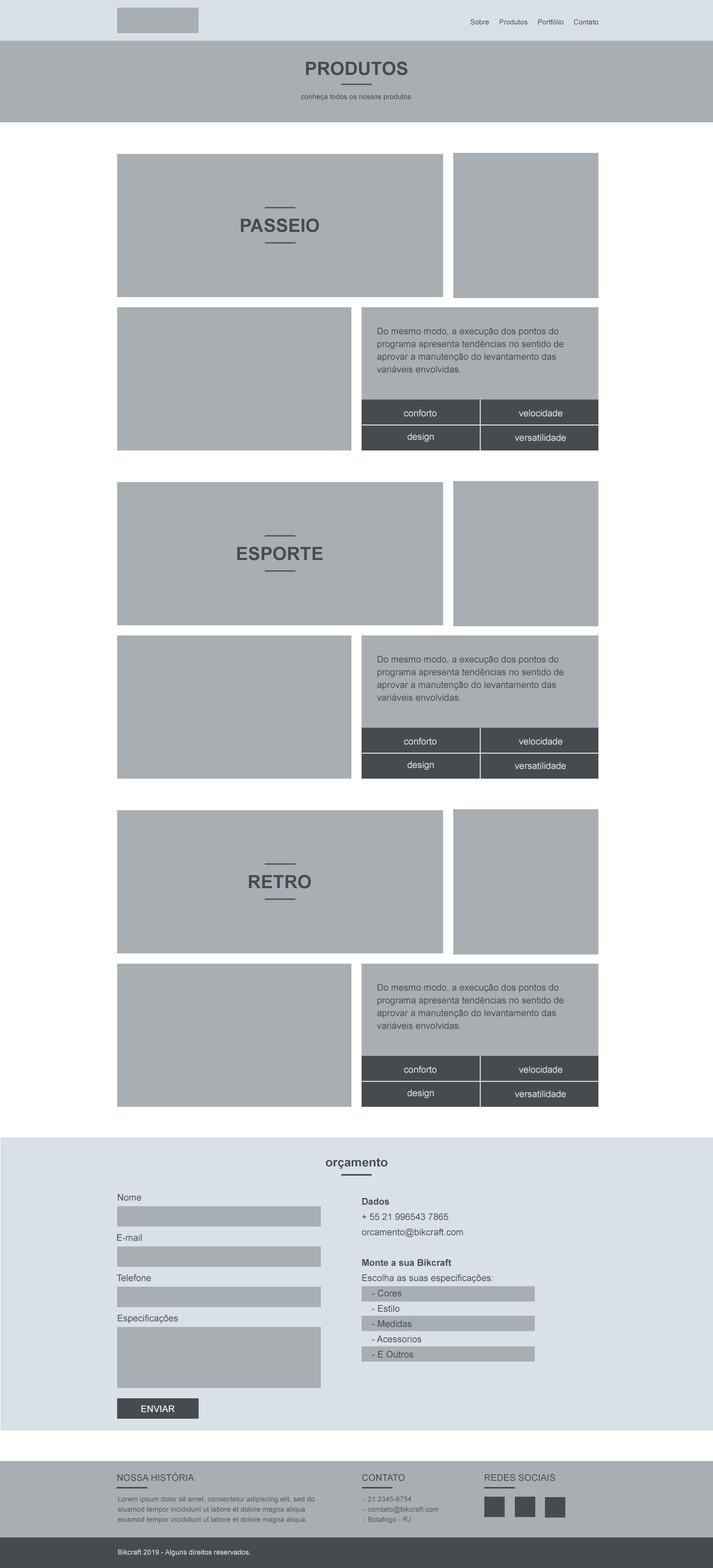
<style>
.page{position:relative;width:713px;height:1568px;background:#a9aeb3}
.page>*{position:absolute;margin:0}
.t1{font:7.1px "ArialMT";color:#484b4d}
.t2{font:18.3px "Arial-BoldMT";color:#484b4d;text-transform:uppercase}
.t3{font:9.2px/12.7px "ArialMT";color:#484b4d}
.t4{font:9.2px "ArialMT";color:#d9e0e6}
.t5{font:12.2px "Arial-BoldMT";color:#484b4d}
.t6{font:9.2px "ArialMT";color:#484b4d}
.t7{font:9.2px/15.3px "ArialMT";color:#484b4d}
.t8{font:9.2px/15.3px "Arial-BoldMT";color:#484b4d}
.t9{font:9.2px "ArialMT";color:#ffffff;text-transform:uppercase}
.t10{font:9.2px "ArialMT";color:#484b4d;text-transform:uppercase}
.t11{font:7.1px/10.2px "ArialMT";color:#484b4d}
.t12{font:7.1px "ArialMT";color:#d9e0e6}
</style>
<div class="page">
<p class="t1" style="left:471px;top:19px;width:128px;height:6px">Sobre     Produtos     Portfólio     Contato</p>
<p class="t2" style="left:306px;top:61px;width:102px;height:14px">produtos</p>
<p class="t1" style="left:301px;top:94px;width:110px;height:7px">conheça todos os nossos produtos</p>
<p class="t2" style="left:241px;top:218px;width:79px;height:14px">passeio</p>
<p class="t3" style="left:377px;top:328px;width:187px;height:45px">Do mesmo modo, a execução dos pontos do programa apresenta tendências no sentido de aprovar a manutenção do levantamento das variáveis envolvidas.</p>
<p class="t4" style="left:404px;top:409px;width:33px;height:8px">conforto</p>
<p class="t4" style="left:519px;top:410px;width:44px;height:7px">velocidade</p>
<p class="t4" style="left:408px;top:433px;width:26px;height:9px">design</p>
<p class="t4" style="left:515px;top:434px;width:51px;height:7px">versatilidade</p>
<p class="t2" style="left:237px;top:546px;width:86px;height:15px">esporte</p>
<p class="t3" style="left:377px;top:656px;width:187px;height:45px">Do mesmo modo, a execução dos pontos do programa apresenta tendências no sentido de aprovar a manutenção do levantamento das variáveis envolvidas.</p>
<p class="t4" style="left:404px;top:737px;width:33px;height:8px">conforto</p>
<p class="t4" style="left:519px;top:738px;width:44px;height:7px">velocidade</p>
<p class="t4" style="left:408px;top:761px;width:26px;height:9px">design</p>
<p class="t4" style="left:515px;top:762px;width:51px;height:7px">versatilidade</p>
<p class="t2" style="left:249px;top:874px;width:62px;height:15px">retro</p>
<p class="t3" style="left:377px;top:984px;width:187px;height:45px">Do mesmo modo, a execução dos pontos do programa apresenta tendências no sentido de aprovar a manutenção do levantamento das variáveis envolvidas.</p>
<p class="t4" style="left:404px;top:1066px;width:33px;height:7px">conforto</p>
<p class="t4" style="left:519px;top:1066px;width:44px;height:7px">velocidade</p>
<p class="t4" style="left:408px;top:1089px;width:26px;height:9px">design</p>
<p class="t4" style="left:515px;top:1091px;width:51px;height:7px">versatilidade</p>
<p class="t5" style="left:326px;top:1158px;width:62px;height:11px">orçamento</p>
<p class="t6" style="left:118px;top:1194px;width:24px;height:7px">Nome</p>
<p class="t7" style="left:362px;top:1198px;width:131px;height:160px"><span class="t8">Dados<br></span>+ 55 21 996543 7865<br>orcamento@bikcraft.com<br><br><span class="t8">Monte a sua Bikcraft<br></span>Escolha as suas especificações:<br>    - Cores <br>    - Estilo<br>    - Medidas<br>    - Acessorios<br>    - E Outros</p>
<p class="t6" style="left:117px;top:1234px;width:25px;height:7px">E-mail</p>
<p class="t6" style="left:117px;top:1274px;width:34px;height:8px">Telefone</p>
<p class="t6" style="left:118px;top:1314px;width:60px;height:9px">Especificações</p>
<p class="t9" style="left:141px;top:1405px;width:34px;height:7px">Enviar</p>
<p class="t10" style="left:117px;top:1472px;width:77px;height:9px">Nossa História</p>
<p class="t10" style="left:362px;top:1474px;width:43px;height:7px">CONTATO</p>
<p class="t10" style="left:485px;top:1474px;width:70px;height:7px">REDES SOCIAIS</p>
<p class="t11" style="left:118px;top:1496px;width:197px;height:28px;opacity:0.88">Lorem ipsum dolor sit amet, consectetur adipiscing elit, sed do eiusmod tempor incididunt ut labore et dolore magna aliqua<br>eiusmod tempor incididunt ut labore et dolore magna aliqua.</p>
<p class="t11" style="left:363px;top:1496px;width:76px;height:28px;opacity:0.88">- 21 2345-6754<br>- comtato@bikcraft.com<br>- Botafogo - RJ</p>
<p class="t12" style="left:118px;top:1549px;width:133px;height:7px">Bikcraft 2019 - Alguns direitos reservados.</p>
</div>
